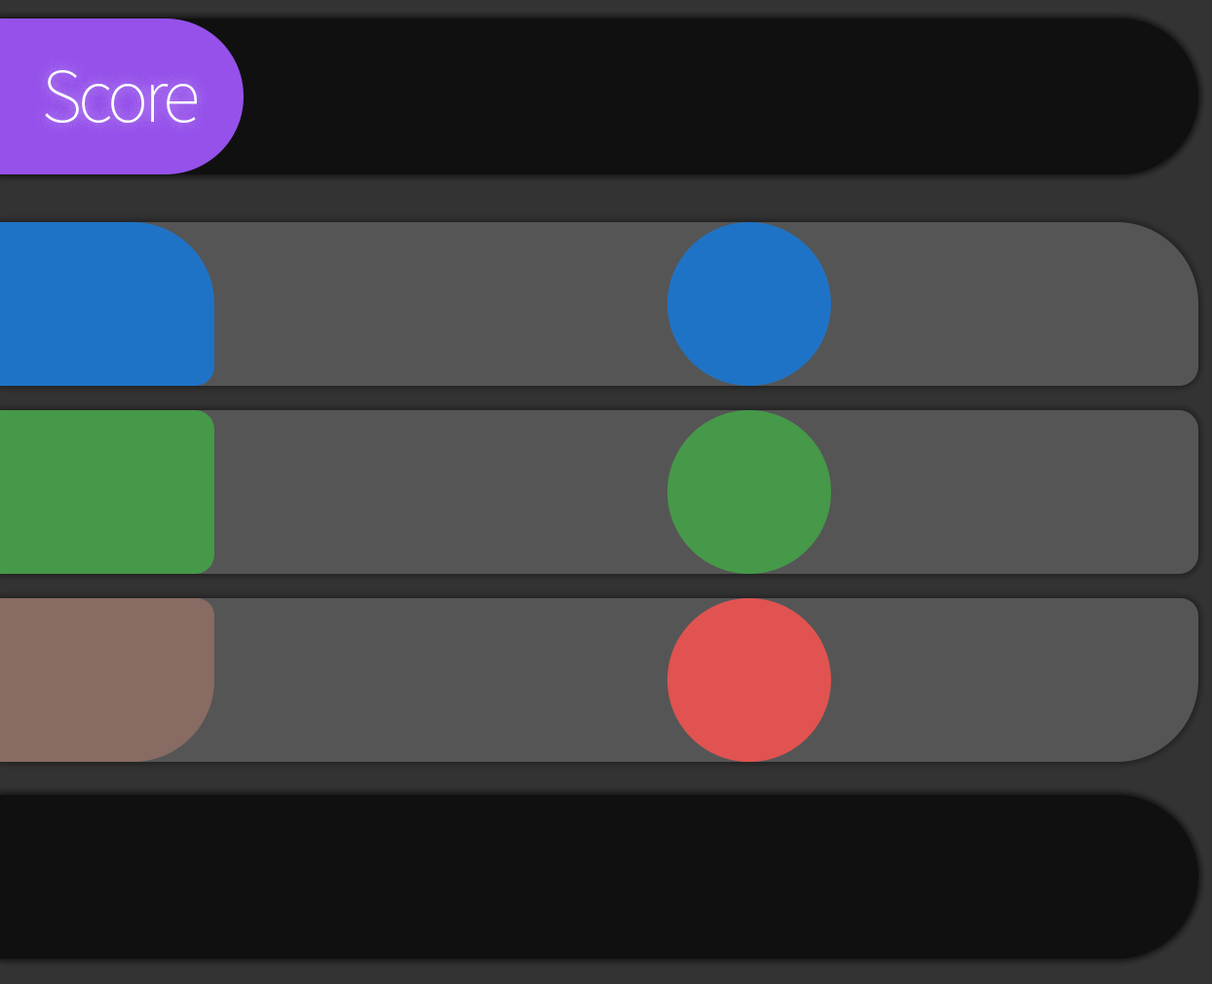
<style>
.page{position:relative;width:1212px;height:984px;background:#555555}
.page>*{position:absolute;margin:0}
.t1{font:70.1px "NotoSansCJKkr-Thin";letter-spacing:-0.06em;color:#ffffff}
</style>
<div class="page">
<p class="t1" style="left:45px;top:70px;width:152px;height:53px">Score</p>
</div>
